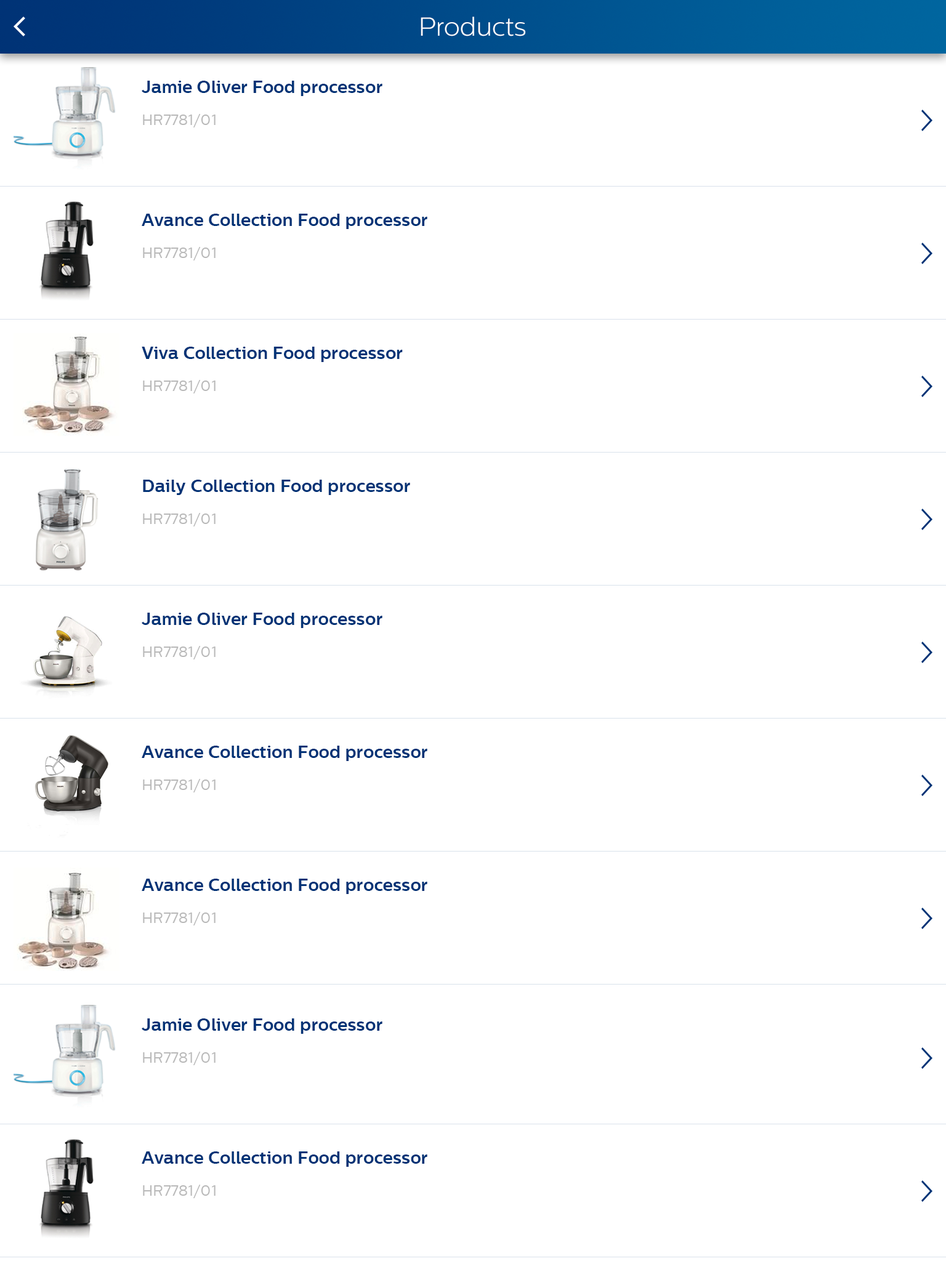
<style>
.page{position:relative;width:946px;height:1261px;background:#ffffff}
.page>*{position:absolute;margin:0}
.t1{font:25.9px "CentraleSansLight";color:#ffffff}
.t2{font:17.2px/30.8px "CentraleSansBold";letter-spacing:0.01em;color:#003376}
.t3{font:14.8px/22.2px "CentraleSansBook";letter-spacing:0.01em;color:#b9b9b9}
.t4{font:17.2px/27.1px "CentraleSansBold";letter-spacing:0.01em;color:#003376}
</style>
<div class="page">
<p class="t1" style="left:421px;top:17px;width:104px;height:19px">Products</p>
<p class="t2" style="left:142px;top:81px;width:240px;height:46px">Jamie Oliver Food processor<br><span class="t3">HR7781/01</span></p>
<p class="t4" style="left:142px;top:214px;width:285px;height:46px">Avance Collection Food processor<br><span class="t3">HR7781/01</span></p>
<p class="t4" style="left:142px;top:347px;width:261px;height:46px">Viva Collection Food processor<br><span class="t3">HR7781/01</span></p>
<p class="t4" style="left:143px;top:480px;width:267px;height:46px">Daily Collection Food processor<br><span class="t3">HR7781/01</span></p>
<p class="t2" style="left:142px;top:613px;width:240px;height:46px">Jamie Oliver Food processor<br><span class="t3">HR7781/01</span></p>
<p class="t4" style="left:142px;top:746px;width:285px;height:46px">Avance Collection Food processor<br><span class="t3">HR7781/01</span></p>
<p class="t4" style="left:142px;top:879px;width:285px;height:46px">Avance Collection Food processor<br><span class="t3">HR7781/01</span></p>
<p class="t2" style="left:142px;top:1018px;width:240px;height:47px">Jamie Oliver Food processor<br><span class="t3">HR7781/01</span></p>
<p class="t4" style="left:142px;top:1151px;width:285px;height:47px">Avance Collection Food processor<br><span class="t3">HR7781/01</span></p>
</div>
